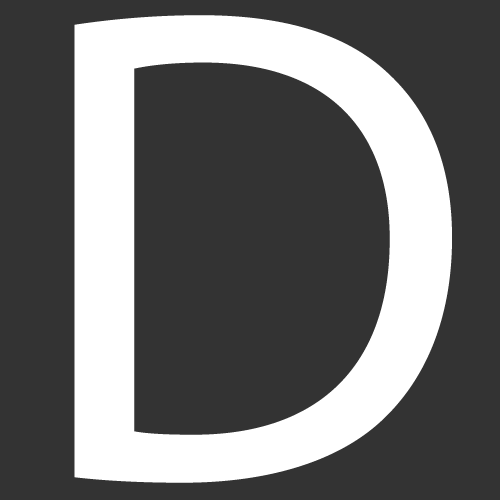
<style>
.page{position:relative;width:500px;height:500px;background:#333333}
.page>*{position:absolute;margin:0}
.t1{font:682.2px "MyriadPro-Regular";color:#ffffff}
</style>
<div class="page">
<p class="t1" style="left:74px;top:15px;width:378px;height:468px">D</p>
</div>
